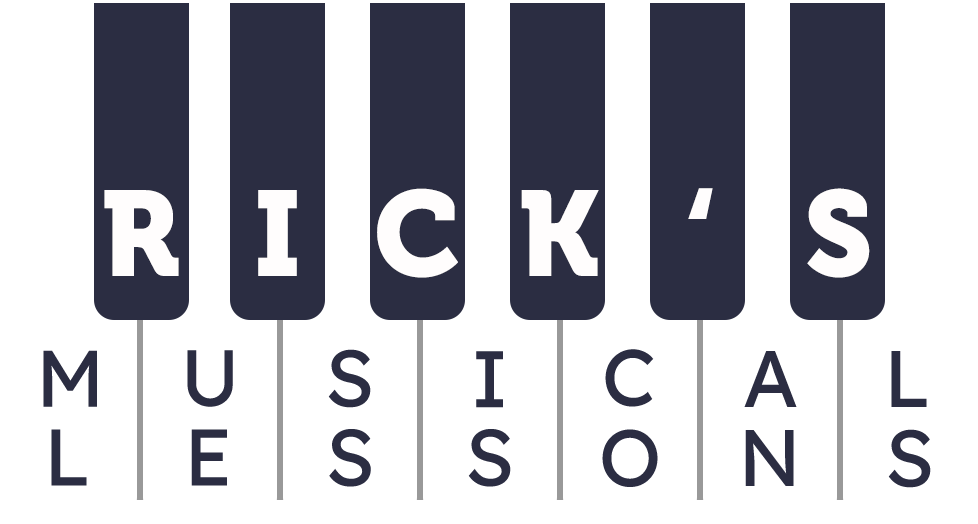
<style>
.page{position:relative;width:978px;height:524px;background:#ffffff}
.page>*{position:absolute;margin:0}
.t1{font:120px "Museo-900";color:#fffdfd}
.t2{font:80px "Lexend-Regular";color:#2b2d42}
</style>
<div class="page">
<p class="t1" style="left:104px;top:190px;width:75px;height:86px">R</p>
<p class="t1" style="left:258px;top:190px;width:39px;height:86px">I</p>
<p class="t1" style="left:377px;top:188px;width:81px;height:90px">C</p>
<p class="t1" style="left:521px;top:190px;width:78px;height:86px">K</p>
<p class="t1" style="left:688px;top:188px;width:25px;height:31px">‘</p>
<p class="t1" style="left:807px;top:188px;width:63px;height:90px">S</p>
<p class="t2" style="left:43px;top:350px;width:54px;height:57px">M</p>
<p class="t2" style="left:187px;top:350px;width:46px;height:57px">U</p>
<p class="t2" style="left:328px;top:349px;width:43px;height:59px">S</p>
<p class="t2" style="left:476px;top:351px;width:27px;height:57px">I</p>
<p class="t2" style="left:605px;top:349px;width:49px;height:58px">C</p>
<p class="t2" style="left:744px;top:351px;width:53px;height:56px">A</p>
<p class="t2" style="left:891px;top:351px;width:36px;height:56px">L</p>
<p class="t2" style="left:51px;top:429px;width:36px;height:57px">L</p>
<p class="t2" style="left:191px;top:429px;width:36px;height:57px">E</p>
<p class="t2" style="left:329px;top:429px;width:42px;height:58px">S</p>
<p class="t2" style="left:468px;top:429px;width:43px;height:58px">S</p>
<p class="t2" style="left:602px;top:429px;width:56px;height:58px">O</p>
<p class="t2" style="left:745px;top:430px;width:49px;height:56px">N</p>
<p class="t2" style="left:888px;top:429px;width:43px;height:59px">S</p>
</div>
